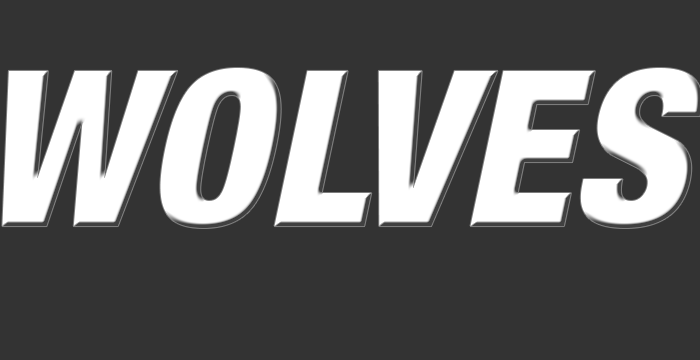
<style>
.page{position:relative;width:700px;height:360px;background:#333333}
.page>*{position:absolute;margin:0}
.t1{font:217.1px "HelveticaNeueLT-BlackCondObl";color:#ffffff}
</style>
<div class="page">
<p class="t1" style="left:2px;top:67px;width:700px;height:161px">WOLVES</p>
</div>
